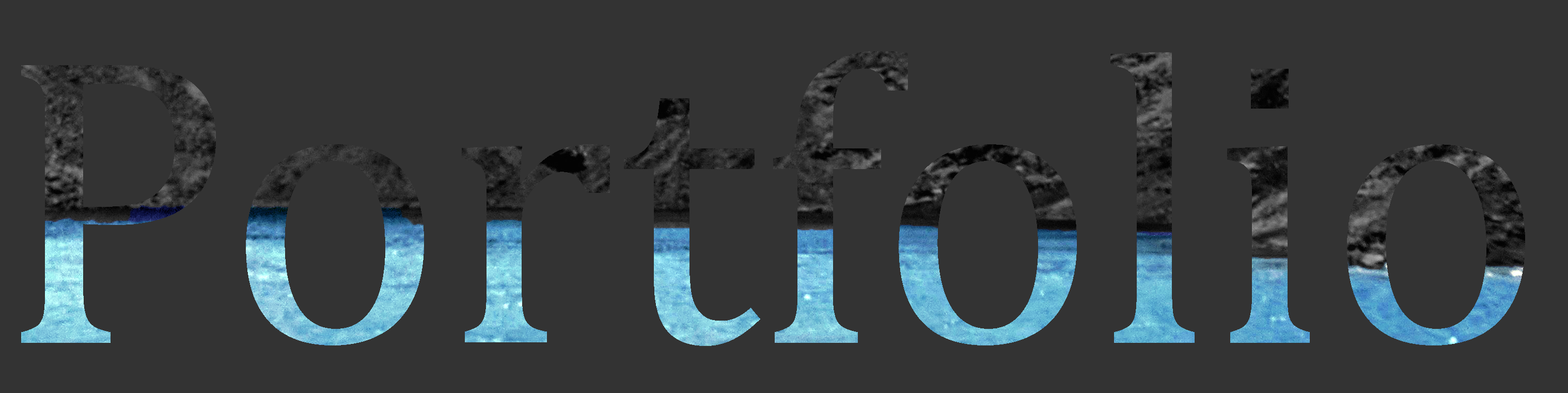
<style>
.page{position:relative;width:1568px;height:393px;background:#333333}
.page>*{position:absolute;margin:0}
.t1{font:415px "CambriaMath"}
</style>
<div class="page">
<p class="t1" style="left:21px;top:51px;width:1504px;height:295px">Portfolio</p>
</div>
